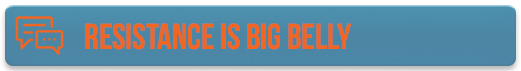
<style>
.page{position:relative;width:521px;height:71px}
.page>*{position:absolute;margin:0}
.t1{font:36px "BebasNeueBold";color:#f26522}
</style>
<div class="page">
<p class="t1" style="left:85px;top:23px;width:266px;height:27px">Resistance is big belly</p>
</div>
